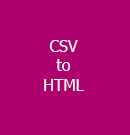
<style>
.page{position:relative;width:130px;height:135px;background:#ae006e}
.page>*{position:absolute;margin:0}
.t1{font:12px "Tahoma";color:#fcfcfa}
</style>
<div class="page">
<p class="t1" style="left:44px;top:40px;width:40px;height:51px;text-align:center">CSV<br>to<br>HTML</p>
</div>
